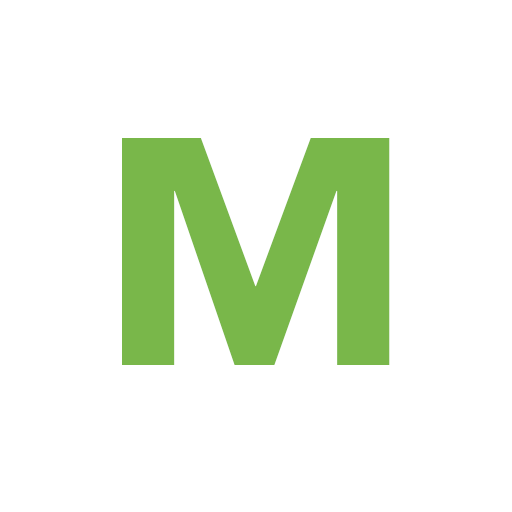
<style>
.page{position:relative;width:512px;height:512px;background:#ffffff}
.page>*{position:absolute;margin:0}
.t1{font:321.2px "Avenir-Black";color:#79b74a;scale:1.04 1}
</style>
<div class="page">
<p class="t1" style="left:122px;top:138px;width:268px;height:227px">M</p>
</div>
